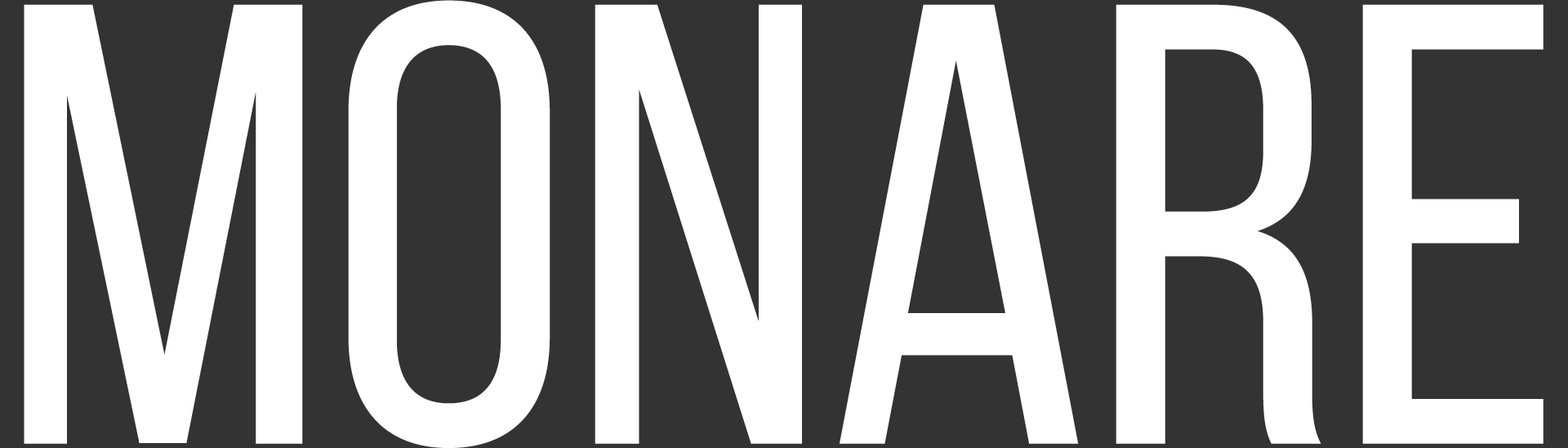
<style>
.page{position:relative;width:1568px;height:448px;background:#333333}
.page>*{position:absolute;margin:0}
.t1{font:626.1px "BebasNeueRegular";color:#ffffff}
</style>
<div class="page">
<p class="t1" style="left:24px;top:0px;width:1520px;height:448px">Monare</p>
</div>
